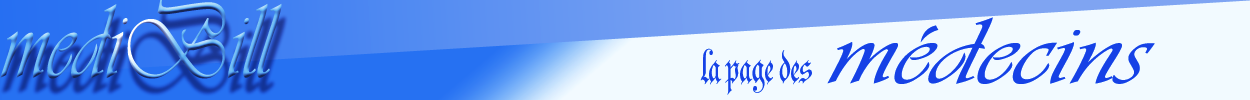
<style>
.page{position:relative;width:1250px;height:100px;background:#f2faff}
.page>*{position:absolute;margin:0}
.t1{font:110.1px "Vivaldii";scale:0.78 1}
.t2{font:98.2px "Vivaldii";color:#1e4ed0;scale:1.24 1}
.t3{font:80.6px "Parchment-Regular";color:#1e4ed0;scale:0.73 1}
</style>
<div class="page">
<p class="t1" style="left:0px;top:0px;width:282px;height:79px">mediBill</p>
<p class="t2" style="left:827px;top:17px;width:328px;height:67px">médecins</p>
<p class="t3" style="left:700px;top:48px;width:112px;height:47px">la page des</p>
</div>
